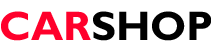
<style>
.page{position:relative;width:211px;height:50px;background:#ffffff}
.page>*{position:absolute;margin:0}
.t1{font:41.3px "GillSansMT-Bold";color:#000000}
.t2{font:41.3px "GillSansMT-Bold";color:#ff002b}
</style>
<div class="page">
<p class="t1" style="left:1px;top:11px;width:211px;height:30px"><span class="t2">CAR</span>SHOP</p>
</div>
